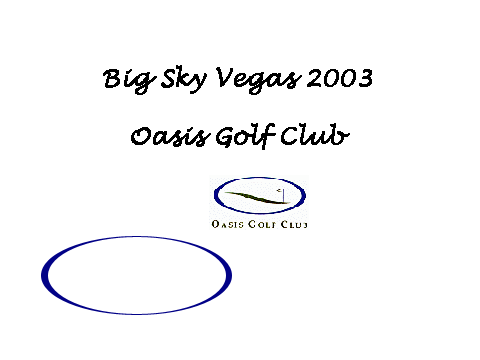
<style>
.page{position:relative;width:480px;height:360px;background:#ffffff}
.page>*{position:absolute;margin:0}
.t1{font:23.1px "LucidaHandwriting-Italic";color:#000000;font-weight:bold}
</style>
<div class="page">
<p class="t1" style="left:103px;top:65px;width:269px;height:85px;text-align:center">Big Sky Vegas 2003<br><br>Oasis Golf Club</p>
</div>
